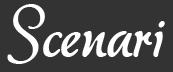
<style>
.page{position:relative;width:173px;height:72px;background:#333333}
.page>*{position:absolute;margin:0}
.t1{font:64px "akaDora";color:#ffffff}
</style>
<div class="page">
<p class="t1" style="left:7px;top:4px;width:158px;height:60px">Scenari</p>
</div>
